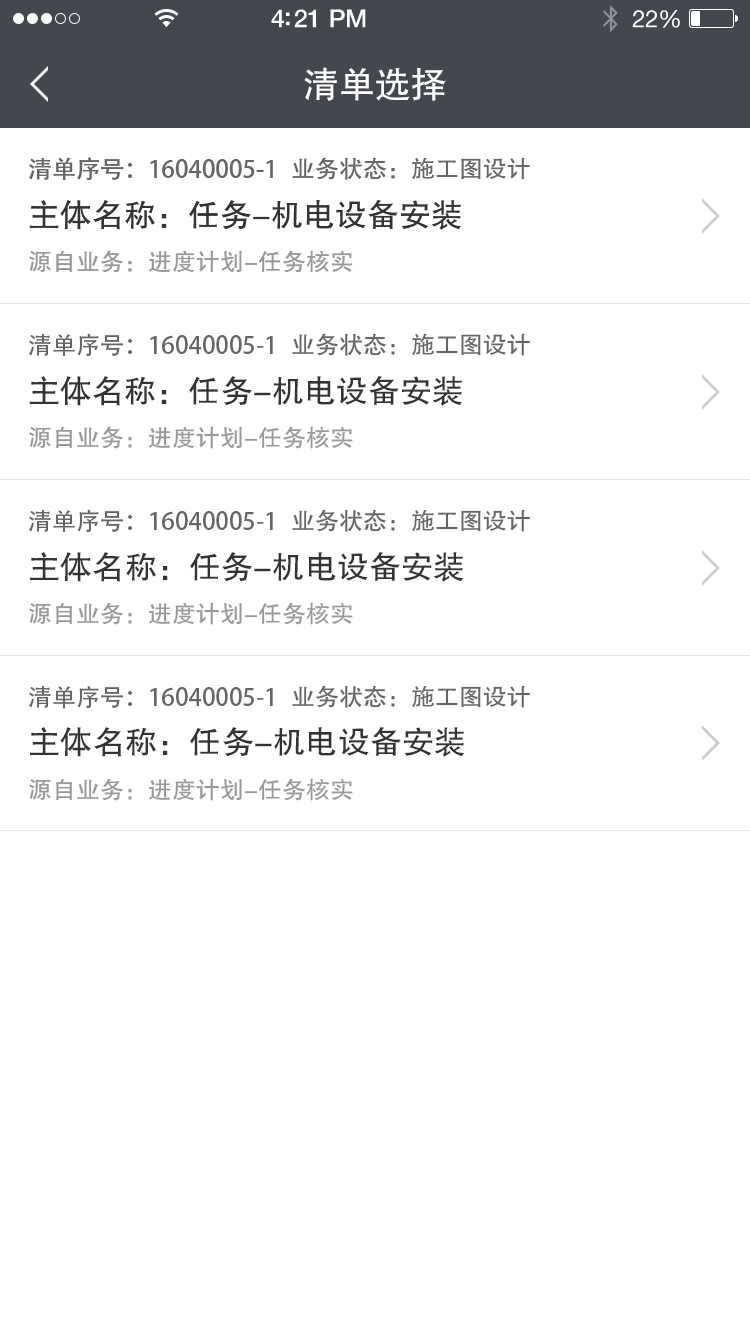
<style>
.page{position:relative;width:750px;height:1334px;background:#ffffff}
.page>*{position:absolute;margin:0}
.t1{font:36px "FZHTJW--GB1-0";color:#ffffff}
.t2{font:24px "AdobeHeitiStd-Regular";color:#666666}
.t3{font:24px "FZHTJW--GB1-0";color:#666666}
.t4{font:32px "FZHTJW--GB1-0";color:#333333}
.t5{font:24px "FZHTJW--GB1-0";color:#999999}
.t6{font:23.9px "AdobeHeitiStd-Regular";color:#666666}
.t7{font:23.9px "FZHTJW--GB1-0";color:#666666}
.t8{font:23.9px "FZHTJW--GB1-0";color:#999999}
.t9{font:23.8px "AdobeHeitiStd-Regular";color:#666666}
.t10{font:23.8px "FZHTJW--GB1-0";color:#666666}
.t11{font:23.8px "FZHTJW--GB1-0";color:#999999}
</style>
<div class="page">
<p class="t1" style="left:304px;top:67px;width:142px;height:34px">清单选择</p>
<p class="t2" style="left:29px;top:157px;width:244px;height:24px">清单序号：16040005-1</p>
<p class="t3" style="left:292px;top:157px;width:238px;height:23px">业务状态：施工图设计</p>
<p class="t4" style="left:29px;top:200px;width:432px;height:30px">主体名称：任务-机电设备安装</p>
<p class="t5" style="left:29px;top:250px;width:324px;height:23px">源自业务：进度计划-任务核实</p>
<p class="t6" style="left:29px;top:333px;width:244px;height:23px">清单序号：16040005-1</p>
<p class="t7" style="left:292px;top:333px;width:238px;height:23px">业务状态：施工图设计</p>
<p class="t4" style="left:29px;top:376px;width:433px;height:30px">主体名称：任务-机电设备安装</p>
<p class="t8" style="left:29px;top:426px;width:324px;height:23px">源自业务：进度计划-任务核实</p>
<p class="t6" style="left:29px;top:509px;width:244px;height:23px">清单序号：16040005-1</p>
<p class="t7" style="left:292px;top:509px;width:238px;height:23px">业务状态：施工图设计</p>
<p class="t4" style="left:30px;top:552px;width:433px;height:30px">主体名称：任务-机电设备安装</p>
<p class="t8" style="left:29px;top:602px;width:324px;height:23px">源自业务：进度计划-任务核实</p>
<p class="t9" style="left:29px;top:686px;width:244px;height:23px">清单序号：16040005-1</p>
<p class="t10" style="left:292px;top:685px;width:238px;height:23px">业务状态：施工图设计</p>
<p class="t4" style="left:30px;top:727px;width:434px;height:30px">主体名称：任务-机电设备安装</p>
<p class="t11" style="left:29px;top:778px;width:324px;height:23px">源自业务：进度计划-任务核实</p>
</div>
